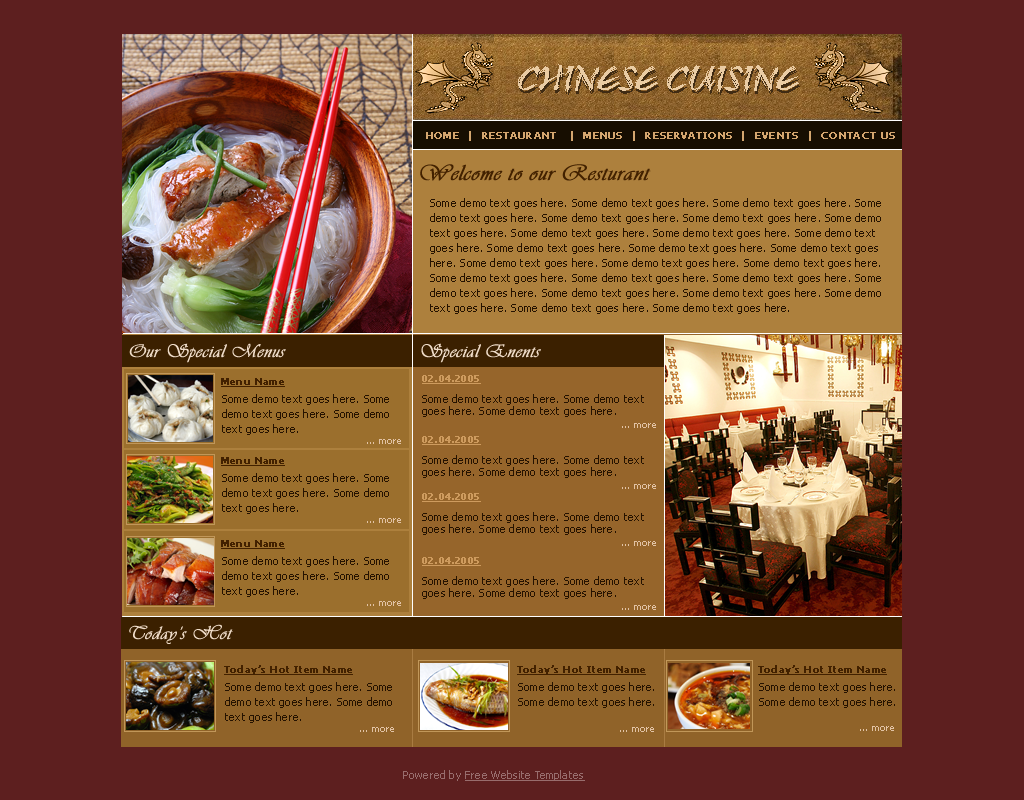
<style>
.page{position:relative;width:1024px;height:800px;background:#5d1f1f}
.page>*{position:absolute;margin:0}
.t1{font:37px "RuachLetPlain";color:#eacca4}
.t2{font:10px "Tahoma";letter-spacing:0.02em;color:#d4a66f;font-weight:bold}
.t3{font:23px "Vivaldii";letter-spacing:0.02em;color:#422100;font-weight:bold}
.t4{font:11px/15px "Tahoma";letter-spacing:0.02em;color:#251200}
.t5{font:19px "Vivaldii";letter-spacing:0.02em;color:#efdcc9;font-weight:bold}
.t6{font:10px "Tahoma";letter-spacing:0.02em;color:#ce9b5e;font-weight:bold;text-decoration:underline}
.t7{font:10px "Tahoma";letter-spacing:0.02em;color:#422100;font-weight:bold;text-decoration:underline}
.t8{font:11px/12px "Tahoma";letter-spacing:0.02em;color:#251200}
.t9{font:10px "Tahoma";letter-spacing:0.02em;color:#e2c3a5}
.t10{font:11px "Tahoma";letter-spacing:0.02em;color:#986d6d;text-decoration:underline}
.t11{font:11px "Tahoma";letter-spacing:0.02em;color:#986d6d}
</style>
<div class="page">
<p class="t1" style="left:518px;top:64px;width:281px;height:28px">CHINESE CUISINE</p>
<p class="t2" style="left:426px;top:131px;width:469px;height:10px">HOME  |  RESTAURANT   |  MENUS  |  RESERVATIONS  |  EVENTS  |  CONTACT US</p>
<p class="t3" style="left:420px;top:164px;width:231px;height:17px">Welcome to our Resturant</p>
<p class="t4" style="left:430px;top:198px;width:451px;height:116px">Some demo text goes here. Some demo text goes here. Some demo text goes here. Some demo text goes here. Some demo text goes here. Some demo text goes here. Some demo text goes here. Some demo text goes here. Some demo text goes here. Some demo text goes here. Some demo text goes here. Some demo text goes here. Some demo text goes here. Some demo text goes here. Some demo text goes here. Some demo text goes here. Some demo text goes here. Some demo text goes here. Some demo text goes here. Some demo text goes here. Some demo text goes here. Some demo text goes here. Some demo text goes here. Some demo text goes here. Some demo text goes here.</p>
<p class="t5" style="left:129px;top:343px;width:157px;height:20px">Our Special Menus</p>
<p class="t5" style="left:421px;top:343px;width:120px;height:20px">Special Enents</p>
<p class="t6" style="left:422px;top:375px;width:59px;height:9px">02.04.2005</p>
<p class="t7" style="left:221px;top:378px;width:64px;height:9px">Menu Name</p>
<p class="t4" style="left:222px;top:394px;width:167px;height:41px">Some demo text goes here. Some demo text goes here. Some demo text goes here.</p>
<p class="t8" style="left:422px;top:394px;width:222px;height:23px">Some demo text goes here. Some demo text goes here. Some demo text goes here.</p>
<p class="t9" style="left:622px;top:423px;width:34px;height:5px">... more</p>
<p class="t6" style="left:422px;top:436px;width:59px;height:9px">02.04.2005</p>
<p class="t9" style="left:367px;top:439px;width:34px;height:5px">... more</p>
<p class="t7" style="left:221px;top:457px;width:64px;height:9px">Menu Name</p>
<p class="t8" style="left:422px;top:455px;width:222px;height:23px">Some demo text goes here. Some demo text goes here. Some demo text goes here.</p>
<p class="t4" style="left:222px;top:473px;width:167px;height:41px">Some demo text goes here. Some demo text goes here. Some demo text goes here.</p>
<p class="t9" style="left:622px;top:484px;width:34px;height:5px">... more</p>
<p class="t6" style="left:422px;top:493px;width:59px;height:9px">02.04.2005</p>
<p class="t9" style="left:367px;top:518px;width:34px;height:5px">... more</p>
<p class="t8" style="left:422px;top:512px;width:222px;height:23px">Some demo text goes here. Some demo text goes here. Some demo text goes here.</p>
<p class="t7" style="left:221px;top:540px;width:64px;height:9px">Menu Name</p>
<p class="t9" style="left:622px;top:541px;width:34px;height:5px">... more</p>
<p class="t4" style="left:222px;top:556px;width:167px;height:41px">Some demo text goes here. Some demo text goes here. Some demo text goes here.</p>
<p class="t6" style="left:422px;top:557px;width:59px;height:9px">02.04.2005</p>
<p class="t8" style="left:422px;top:576px;width:222px;height:23px">Some demo text goes here. Some demo text goes here. Some demo text goes here.</p>
<p class="t9" style="left:367px;top:601px;width:34px;height:5px">... more</p>
<p class="t9" style="left:622px;top:605px;width:34px;height:5px">... more</p>
<p class="t5" style="left:129px;top:624px;width:104px;height:20px">Today’s Hot</p>
<p class="t7" style="left:224px;top:665px;width:129px;height:10px">Today’s Hot Item Name</p>
<p class="t7" style="left:517px;top:665px;width:129px;height:10px">Today’s Hot Item Name</p>
<p class="t7" style="left:758px;top:665px;width:129px;height:10px">Today’s Hot Item Name</p>
<p class="t4" style="left:225px;top:682px;width:167px;height:41px">Some demo text goes here. Some demo text goes here. Some demo text goes here.</p>
<p class="t4" style="left:518px;top:682px;width:136px;height:26px">Some demo text goes here. <br>Some demo text goes here.</p>
<p class="t4" style="left:759px;top:682px;width:136px;height:26px">Some demo text goes here. <br>Some demo text goes here.</p>
<p class="t9" style="left:860px;top:726px;width:34px;height:5px">... more</p>
<p class="t9" style="left:360px;top:727px;width:34px;height:5px">... more</p>
<p class="t9" style="left:620px;top:727px;width:34px;height:5px">... more</p>
<p class="t10" style="left:403px;top:770px;width:182px;height:11px"><span class="t11">Powered by </span>Free Website Templates</p>
</div>
